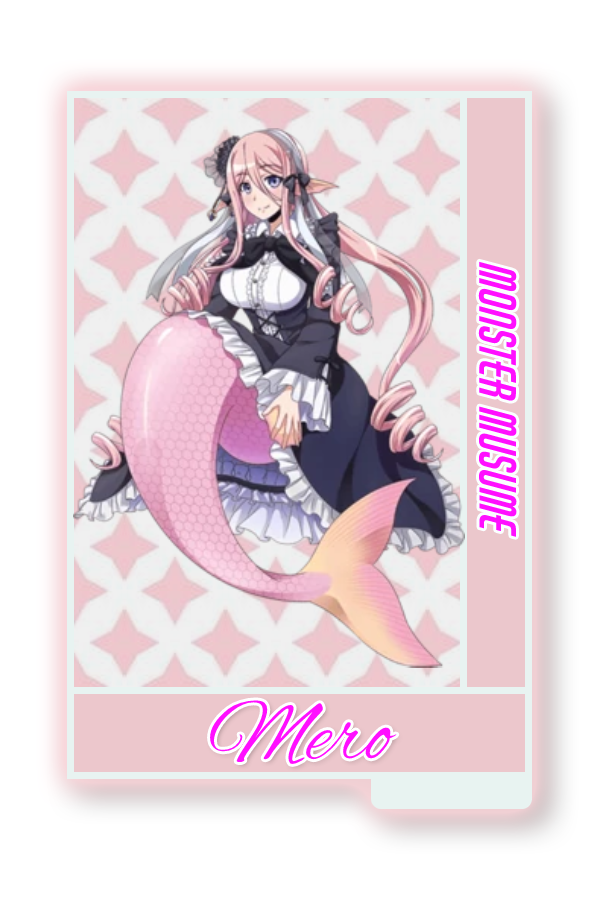
<style>
.page{position:relative;width:600px;height:900px;background:#ffffff}
.page>*{position:absolute;margin:0}
.t1{font:48.8px "AirAmerica-Regular";color:#ff0fff}
.t2{font:88.3px "AlexBrush-Regular";color:#ff0fff}
</style>
<div class="page">
<p class="t1" style="left:478px;top:261px;width:39px;height:276px;rotate:90deg">Monster Musume</p>
<p class="t2" style="left:210px;top:700px;width:187px;height:64px">Mero</p>
</div>
